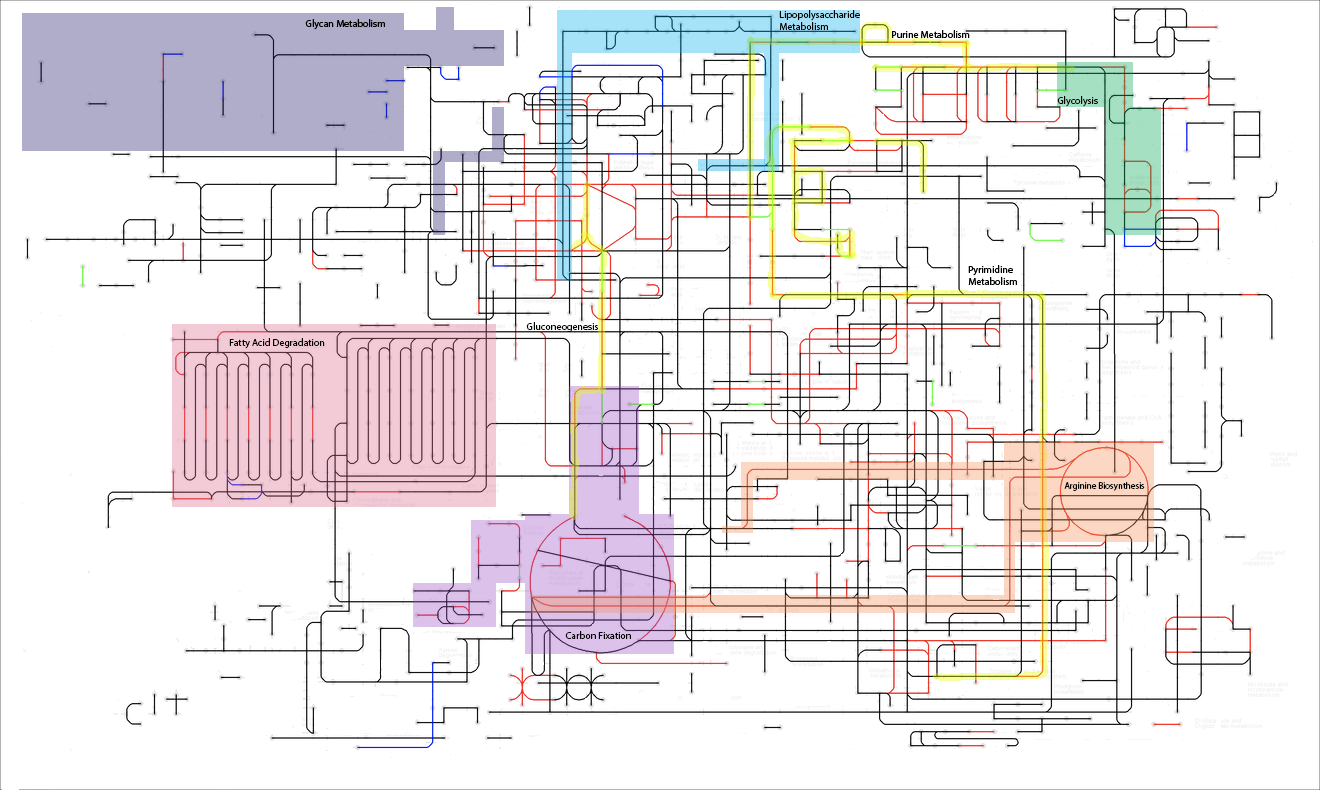
<style>
.page{position:relative;width:1320px;height:790px;background:#ffffff}
.page>*{position:absolute;margin:0}
.t1{font:10px "MyriadPro-Regular";color:#000000}
.t2{font:9px "MyriadPro-Regular";color:#000000}
</style>
<div class="page">
<p class="t1" style="left:779px;top:10px;width:81px;height:20px">Lipopolysaccharide <br>Metabolism</p>
<p class="t1" style="left:1057px;top:96px;width:41px;height:11px">Glycolysis</p>
<p class="t1" style="left:526px;top:322px;width:72px;height:10px">Gluconeogenesis</p>
<p class="t1" style="left:229px;top:338px;width:96px;height:11px">Fatty Acid Degradation</p>
<p class="t2" style="left:1064px;top:482px;width:81px;height:9px">Arginine Biosynthesis</p>
<p class="t1" style="left:565px;top:631px;width:66px;height:8px">Carbon Fixation</p>
</div>
